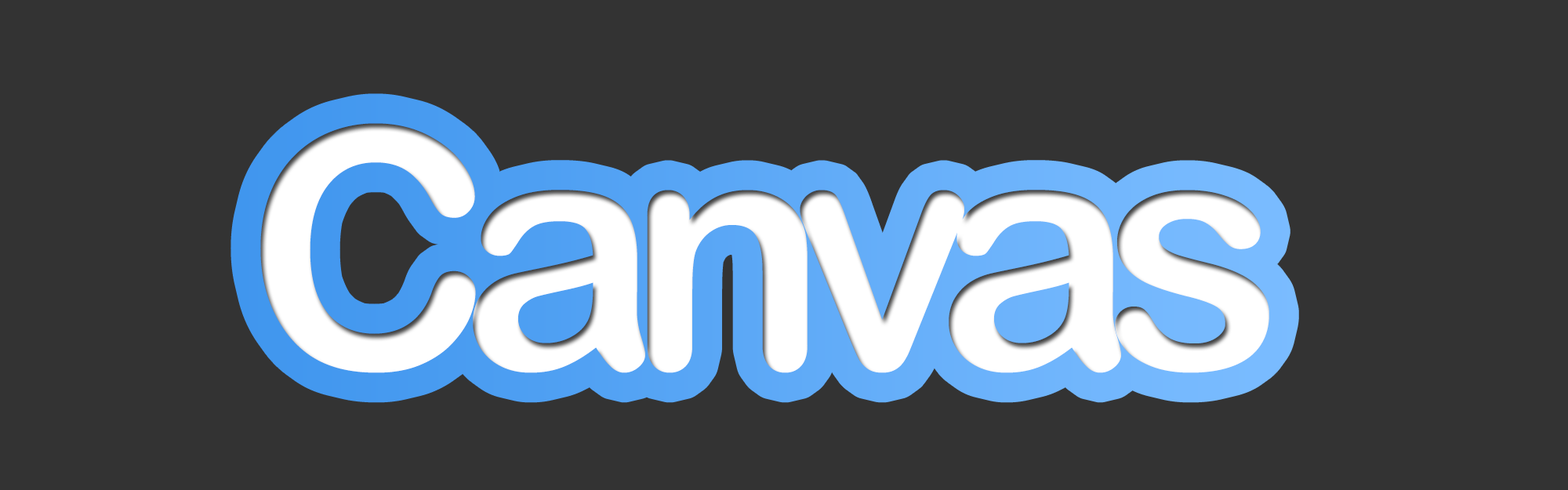
<style>
.page{position:relative;width:1568px;height:490px;background:#333333}
.page>*{position:absolute;margin:0}
.t1{font:336.5px "ArialRoundedMTBold";letter-spacing:-0.1em;color:#ffffff}
</style>
<div class="page">
<p class="t1" style="left:260px;top:123px;width:1009px;height:250px">Canvas</p>
</div>
